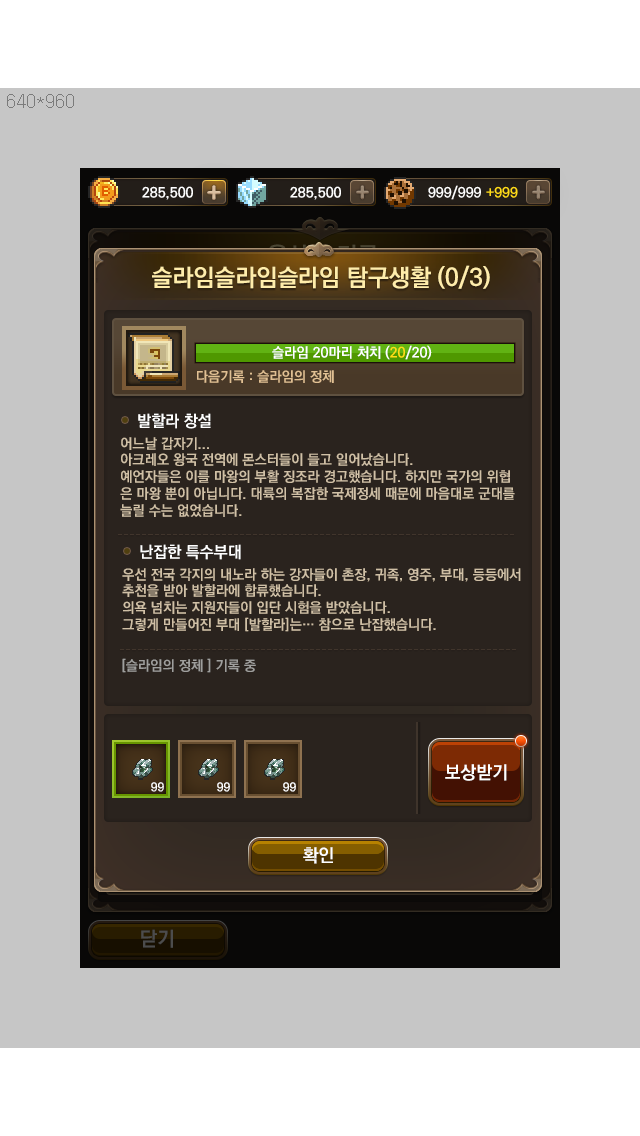
<style>
.page{position:relative;width:640px;height:1136px;background:#c6c6c6}
.page>*{position:absolute;margin:0}
.t1{font:24px "KoPubDotumBold";color:#ffedab}
.t2{font:14px "KoPubDotumBold";color:#ffffff}
.t3{font:14px "KoPubDotumBold";color:#ffdc18}
.t4{font:14px "KoPubDotumBold";color:#e1c093}
.t5{font:16px "KoPubDotumBold";color:#ffffff}
.t6{font:14px "KoPubDotumBold";color:#d0c0a6}
.t7{font:14px "KoPubDotumBold";color:#9f9f9d}
.t8{font:18px "KoPubDotumBold";color:#ffffff}
.t9{font:12px "KoPubDotumBold";color:#ffffff}
</style>
<div class="page">
<p class="t1" style="left:152px;top:265px;width:338px;height:24px">슬라임슬라임슬라임 탐구생활 (0/3)</p>
<p class="t2" style="left:272px;top:345px;width:160px;height:15px">슬라임 20마리 처치 (<span class="t3">20</span>/20)</p>
<p class="t4" style="left:197px;top:370px;width:137px;height:13px">다음기록 : 슬라임의 정체</p>
<p class="t5" style="left:138px;top:413px;width:73px;height:16px">발할라 창설</p>
<p class="t6" style="left:120px;top:437px;width:395px;height:80px">어느날 갑자기... <br>아크레오 왕국 전역에 몬스터들이 들고 일어났습니다. <br>예언자들은 이를 마왕의 부활 징조라 경고했습니다. 하지만 국가의 위협<br>은 마왕 뿐이 아닙니다. 대륙의 복잡한 국제정세 때문에 마음대로 군대를 <br>늘릴 수는 없었습니다.</p>
<p class="t5" style="left:140px;top:544px;width:101px;height:16px">난잡한 특수부대</p>
<p class="t6" style="left:122px;top:568px;width:399px;height:64px">우선 전국 각지의 내노라 하는 강자들이 촌장, 귀족, 영주, 부대, 등등에서 <br>추천을 받아 발할라에 합류했습니다.<br>의욕 넘치는 지원자들이 입단 시험을 받았습니다.<br>그렇게 만들어진 부대 [발할라]는… 참으로 난잡했습니다.</p>
<p class="t7" style="left:122px;top:658px;width:134px;height:15px">[슬라임의 정체 ] 기록 중</p>
<p class="t8" style="left:445px;top:764px;width:62px;height:17px">보상받기</p>
<p class="t9" style="left:151px;top:782px;width:13px;height:10px">99</p>
<p class="t9" style="left:217px;top:782px;width:13px;height:10px">99</p>
<p class="t9" style="left:283px;top:782px;width:13px;height:10px">99</p>
<p class="t8" style="left:303px;top:847px;width:30px;height:17px">확인</p>
</div>
